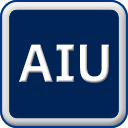
<style>
.page{position:relative;width:128px;height:128px;background:#002456}
.page>*{position:absolute;margin:0}
.t1{font:53.3px "IBMPlexSans-SemiBold";color:#ffffff}
</style>
<div class="page">
<p class="t1" style="left:19px;top:44px;width:90px;height:39px">AIU</p>
</div>
